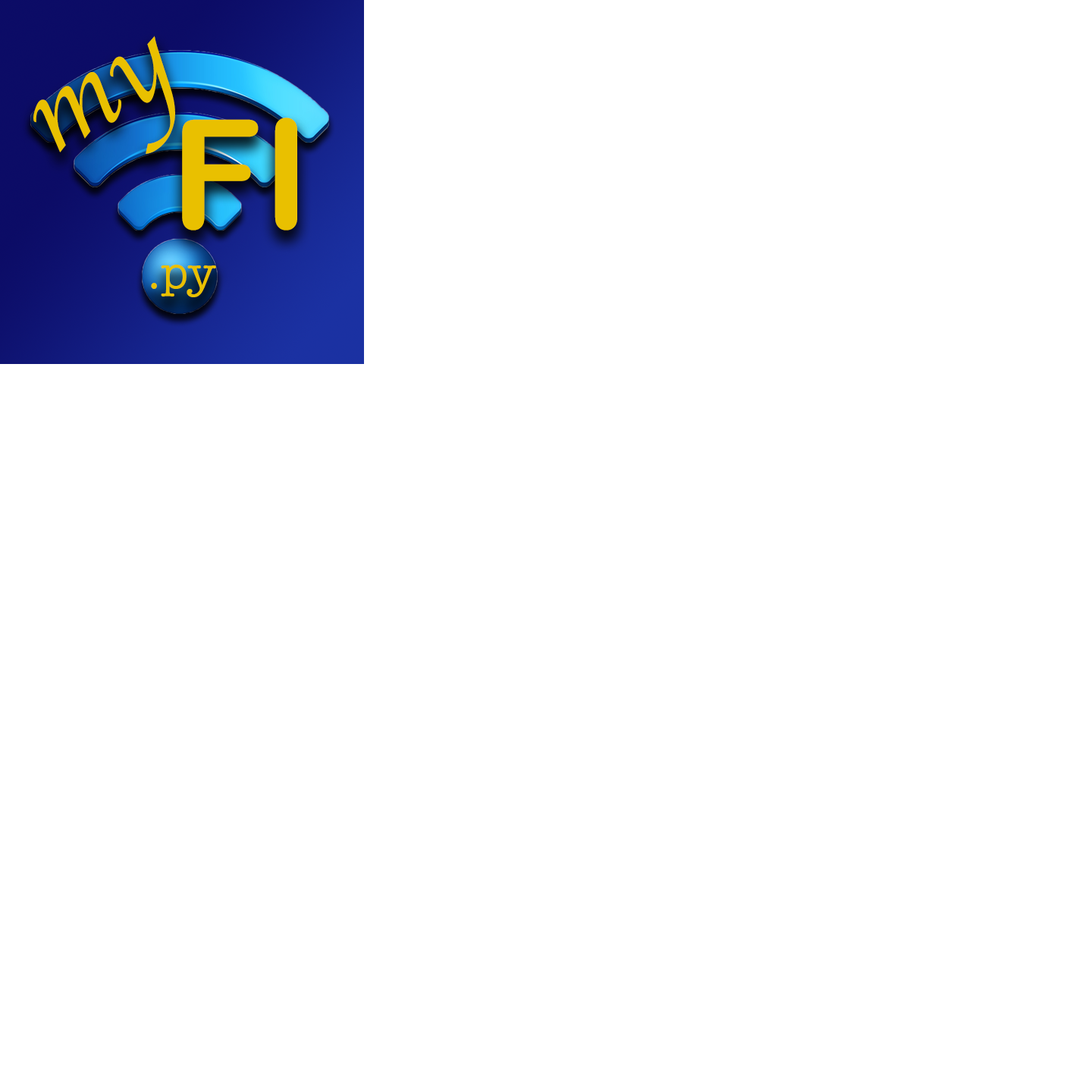
<style>
.page{position:relative;width:1092px;height:1092px;background:#ffffff}
.page>*{position:absolute;margin:0}
.t1{font:113.7px "Apple-Chancery";color:#e9c000}
.t2{font:151.7px "ArialRoundedMTBold";color:#e9c000}
.t3{font:45.5px "AmericanTypewriter";color:#e9c000}
</style>
<div class="page">
<p class="t1" style="left:33px;top:36px;width:142px;height:118px;rotate:-29deg">my</p>
<p class="t2" style="left:182px;top:118px;width:115px;height:113px">FI</p>
<p class="t3" style="left:151px;top:265px;width:65px;height:32px">.py</p>
</div>
